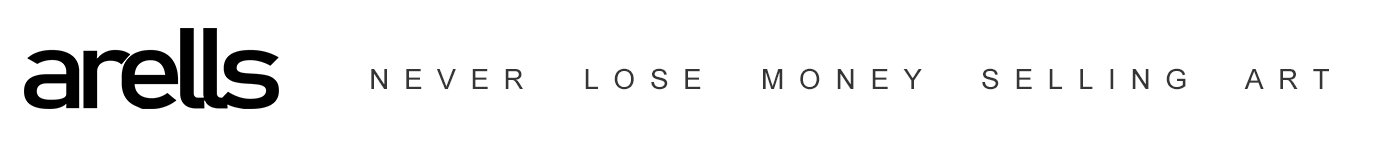
<style>
.page{position:relative;width:1386px;height:144px;background:#ffffff}
.page>*{position:absolute;margin:0}
.t1{font:28.1px "ArialMT";letter-spacing:0.52em;color:#353535}
</style>
<div class="page">
<p class="t1" style="left:371px;top:68px;width:958px;height:22px">NEVER  LOSE  MONEY  SELLING  ART</p>
</div>
